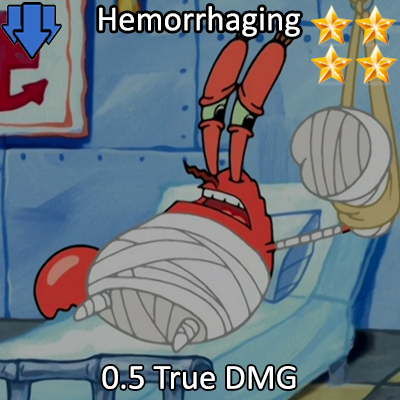
<style>
.page{position:relative;width:400px;height:400px}
.page>*{position:absolute;margin:0}
.t1{font:60px "Calibri";color:#ffffff}
</style>
<div class="page">
<p class="t1" style="left:99px;top:6px;width:201px;height:31px">Hemorrhaging</p>
<p class="t1" style="left:102px;top:366px;width:194px;height:23px">0.5 True DMG</p>
</div>
